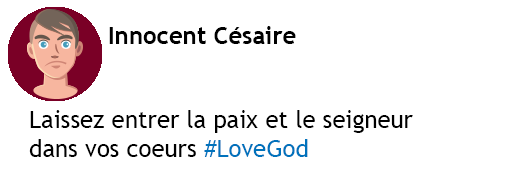
<style>
.page{position:relative;width:512px;height:190px;background:#ffffff}
.page>*{position:absolute;margin:0}
.t1{font:24px "TrebuchetMS-Bold";color:#000000}
.t2{font:24px "TrebuchetMS";color:#000000}
.t3{font:24px "TrebuchetMS";color:#0072bc}
</style>
<div class="page">
<p class="t1" style="left:109px;top:26px;width:187px;height:18px">Innocent Césaire</p>
<p class="t2" style="left:29px;top:110px;width:384px;height:47px">Laissez entrer la paix et le seigneur <br>dans vos coeurs <span class="t3">#LoveGod</span></p>
</div>
